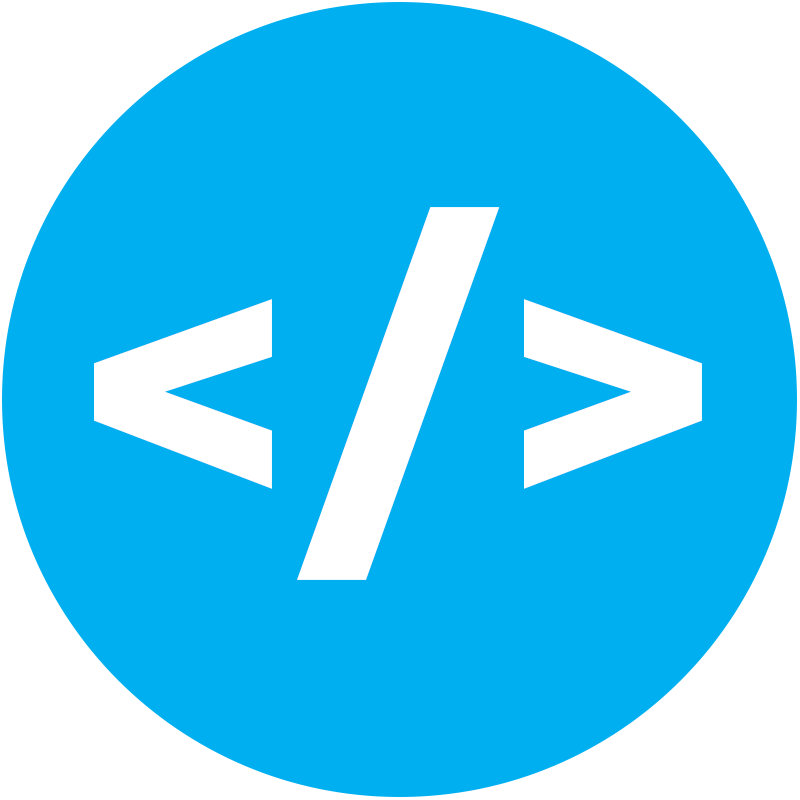
<style>
.page{position:relative;width:800px;height:800px;background:#00aff0}
.page>*{position:absolute;margin:0}
.t1{font:442.7px "Exo-Bold";color:#ffffff;scale:1.07 1}
</style>
<div class="page">
<p class="t1" style="left:94px;top:207px;width:608px;height:373px">&lt;/&gt;</p>
</div>
